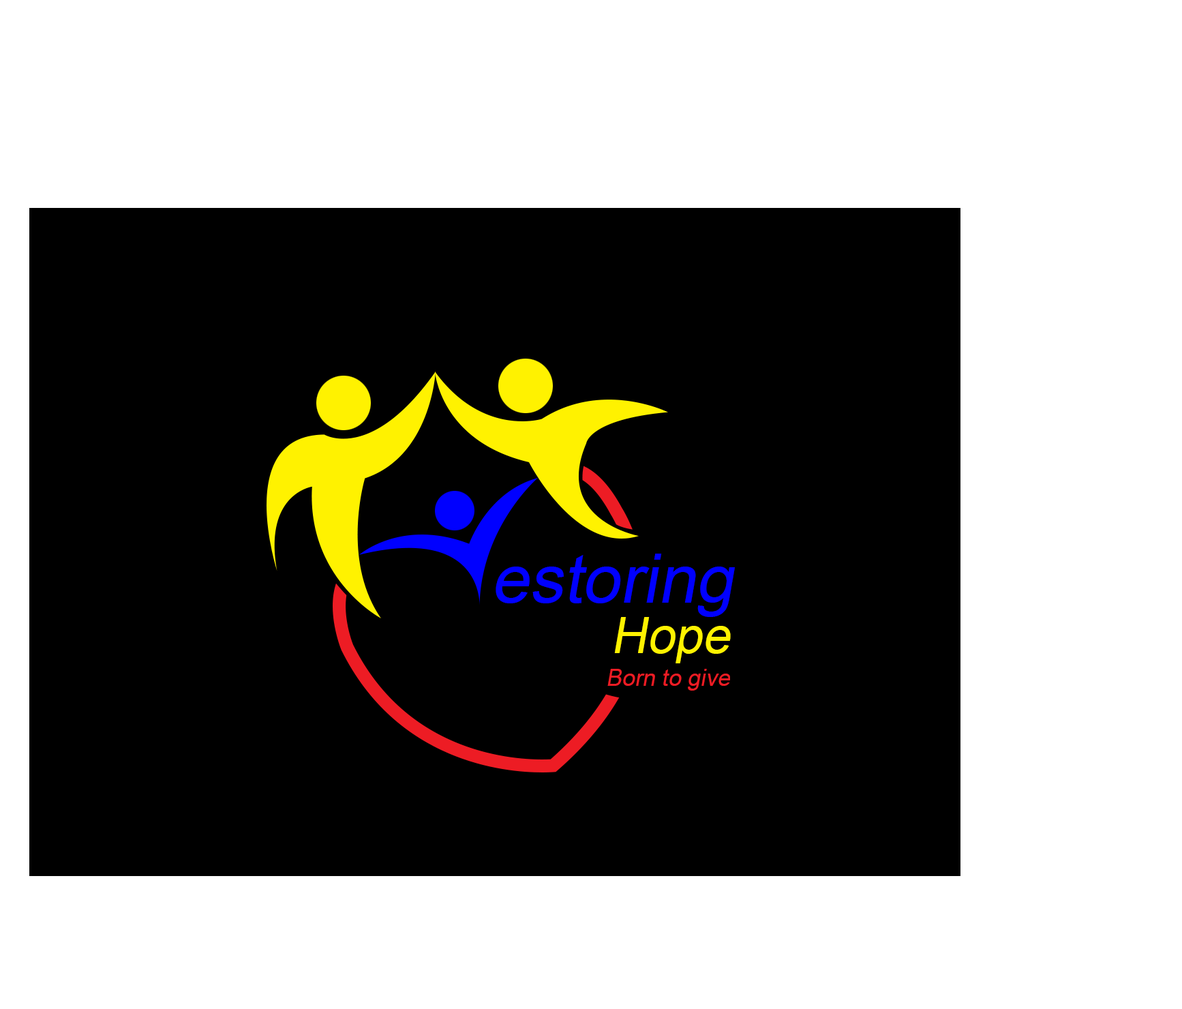
<style>
.page{position:relative;width:1182px;height:1009px;background:#000000}
.page>*{position:absolute;margin:0}
.t1{font:68.2px "ArialMT";color:#0000ff;font-style:italic}
.t2{font:49.8px "ArialMT";color:#fff200;font-style:italic}
.t3{font:23.2px "ArialMT";color:#ed1c24;font-style:italic}
</style>
<div class="page">
<p class="t1" style="left:496px;top:553px;width:239px;height:64px">estoring</p>
<p class="t2" style="left:614px;top:617px;width:117px;height:46px">Hope</p>
<p class="t3" style="left:607px;top:669px;width:123px;height:22px">Born to give</p>
</div>
